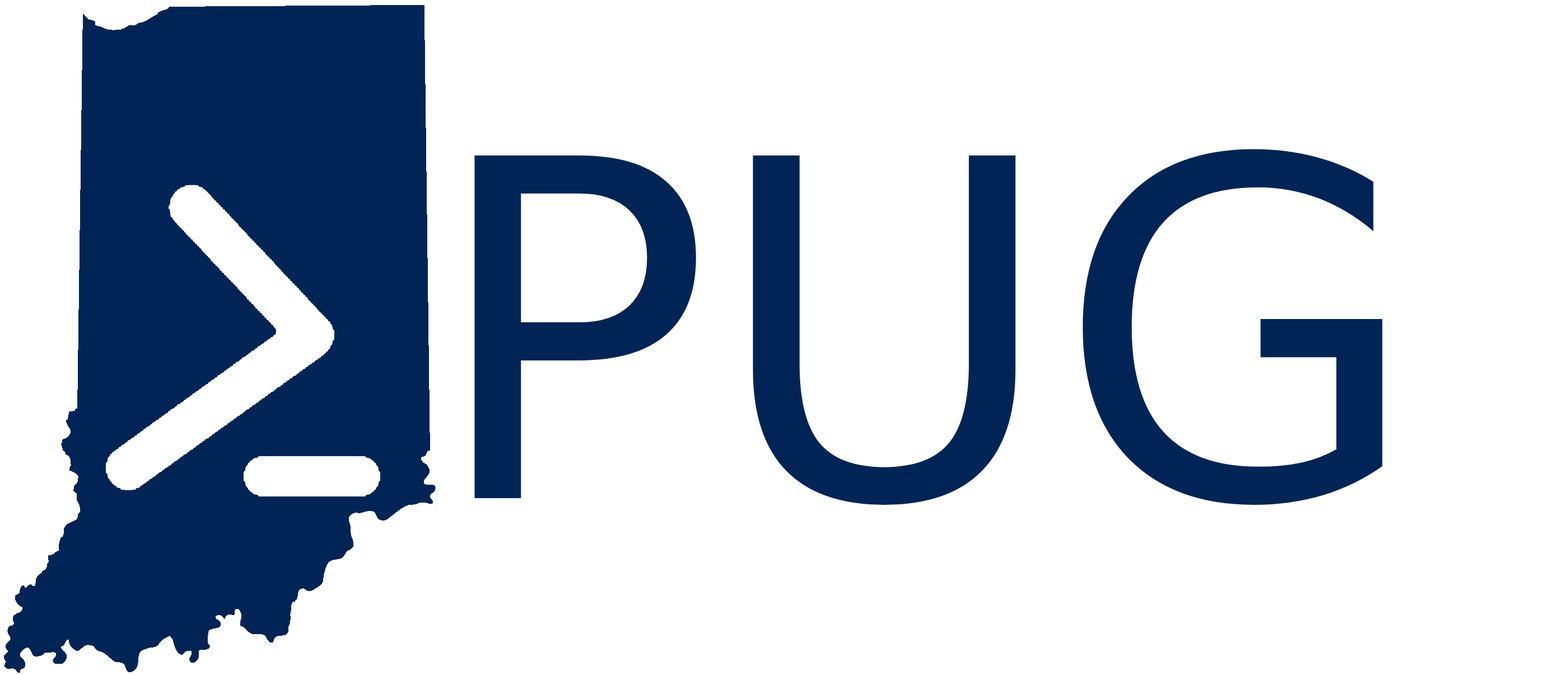
<style>
.page{position:relative;width:1568px;height:675px;background:#ffffff}
.page>*{position:absolute;margin:0}
.t1{font:470.4px "DejaVuSans";color:#012456}
</style>
<div class="page">
<p class="t1" style="left:474px;top:149px;width:909px;height:356px">PUG</p>
</div>
